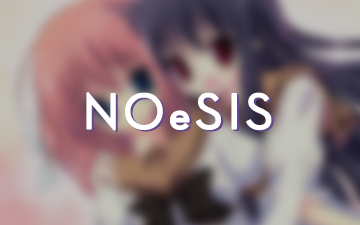
<style>
.page{position:relative;width:360px;height:225px}
.page>*{position:absolute;margin:0}
.t1{font:50.8px "DroidSansFallback";letter-spacing:0.082em;color:#ffffff;font-weight:bold}
.t2{font:50.8px "DroidSansFallback";letter-spacing:0.082em;font-weight:bold}
</style>
<div class="page">
<p class="t1" style="left:86px;top:92px;width:186px;height:39px">NOeSIS</p>
<p class="t2" style="left:88px;top:93px;width:186px;height:39px">NOeSIS</p>
</div>
